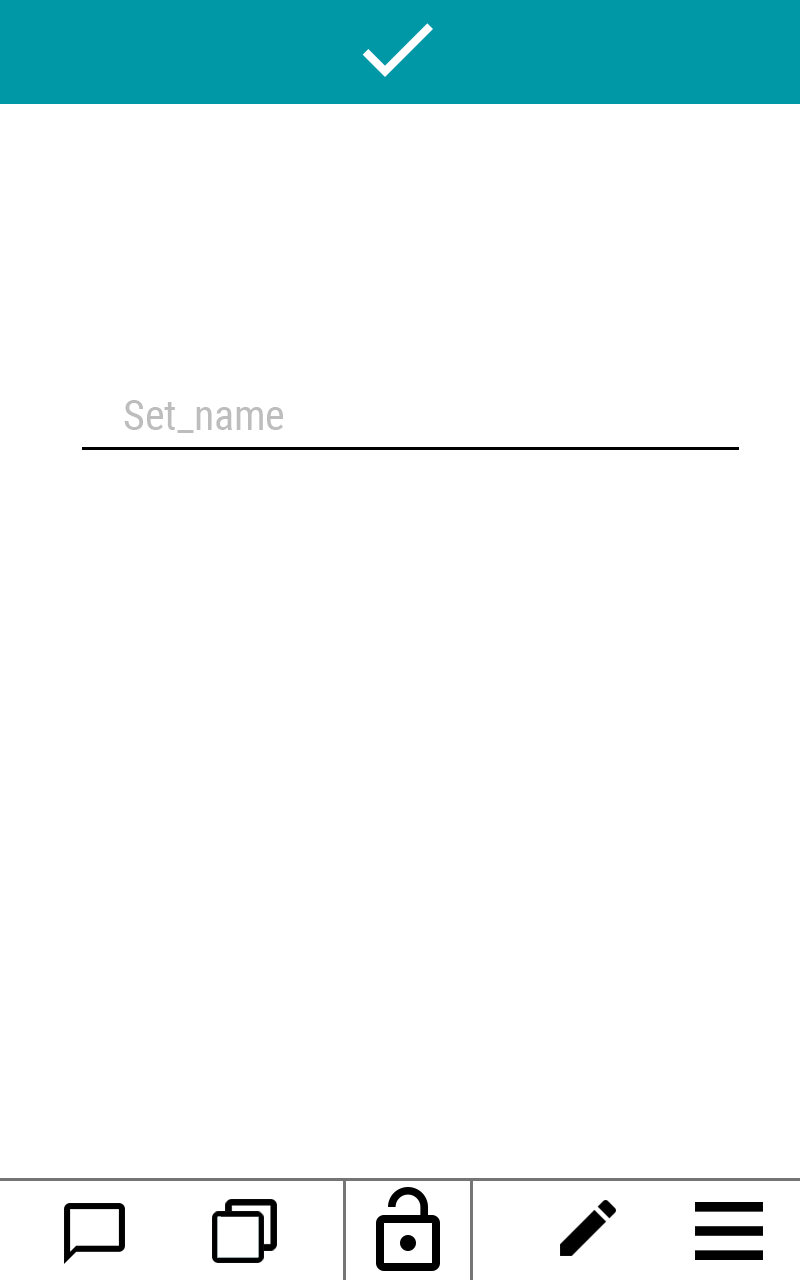
<style>
.page{position:relative;width:800px;height:1280px;background:#ffffff}
.page>*{position:absolute;margin:0}
.t1{font:41.8px "RobotoCondensed-Regular";color:#bdbdbd}
</style>
<div class="page">
<p class="t1" style="left:124px;top:400px;width:159px;height:33px">Set_name</p>
</div>
